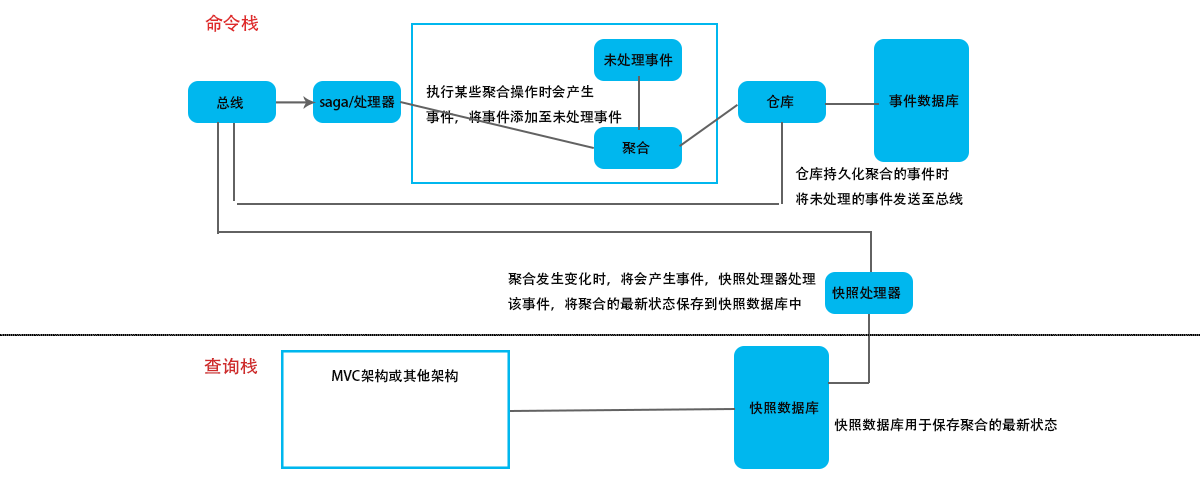
<style>
.page{position:relative;width:1200px;height:500px;background:#ffffff}
.page>*{position:absolute;margin:0}
.t1{font:18px "AdobeHeitiStd-Regular";color:#df2b2b}
.t2{font:14px "AdobeHeitiStd-Regular";color:#0b0b0b}
.t3{font:18px "AdobeHeitiStd-Regular";color:#cf2b2b}
</style>
<div class="page">
<p class="t1" style="left:205px;top:14px;width:54px;height:18px">命令栈</p>
<p class="t2" style="left:604px;top:53px;width:69px;height:14px">未处理事件</p>
<p class="t2" style="left:426px;top:84px;width:196px;height:40px">执行某些聚合操作时会产生<br>事件，将事件添加至未处理事件</p>
<p class="t2" style="left:217px;top:96px;width:27px;height:14px">总线</p>
<p class="t2" style="left:319px;top:95px;width:76px;height:16px">saga/处理器</p>
<p class="t2" style="left:766px;top:94px;width:28px;height:15px">仓库</p>
<p class="t2" style="left:889px;top:94px;width:70px;height:14px">事件数据库</p>
<p class="t2" style="left:622px;top:141px;width:28px;height:14px">聚合</p>
<p class="t2" style="left:795px;top:166px;width:168px;height:40px">仓库持久化聚合的事件时<br>将未处理的事件发送至总线</p>
<p class="t2" style="left:508px;top:272px;width:308px;height:39px">聚合发生变化时，将会产生事件，快照处理器处理<br>该事件，将聚合的最新状态保存到快照数据库中</p>
<p class="t2" style="left:832px;top:286px;width:69px;height:14px">快照处理器</p>
<p class="t3" style="left:204px;top:357px;width:54px;height:18px">查询栈</p>
<p class="t2" style="left:332px;top:368px;width:126px;height:15px">MVC架构或其他架构</p>
<p class="t2" style="left:749px;top:401px;width:70px;height:14px">快照数据库</p>
<p class="t2" style="left:834px;top:418px;width:223px;height:14px">快照数据库用于保存聚合的最新状态</p>
</div>
